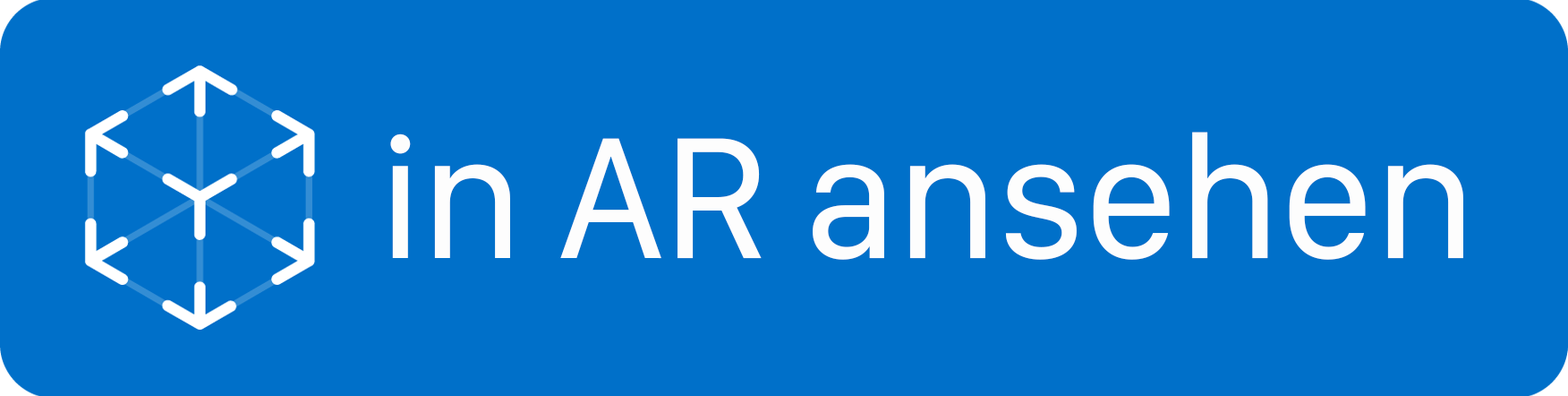
<style>
.page{position:relative;width:1568px;height:396px;background:#0070c9}
.page>*{position:absolute;margin:0}
.t1{font:179px "SFCompactDisplay-Regular";color:#fdfdfd}
</style>
<div class="page">
<p class="t1" style="left:390px;top:132px;width:1073px;height:128px">in AR ansehen</p>
</div>
